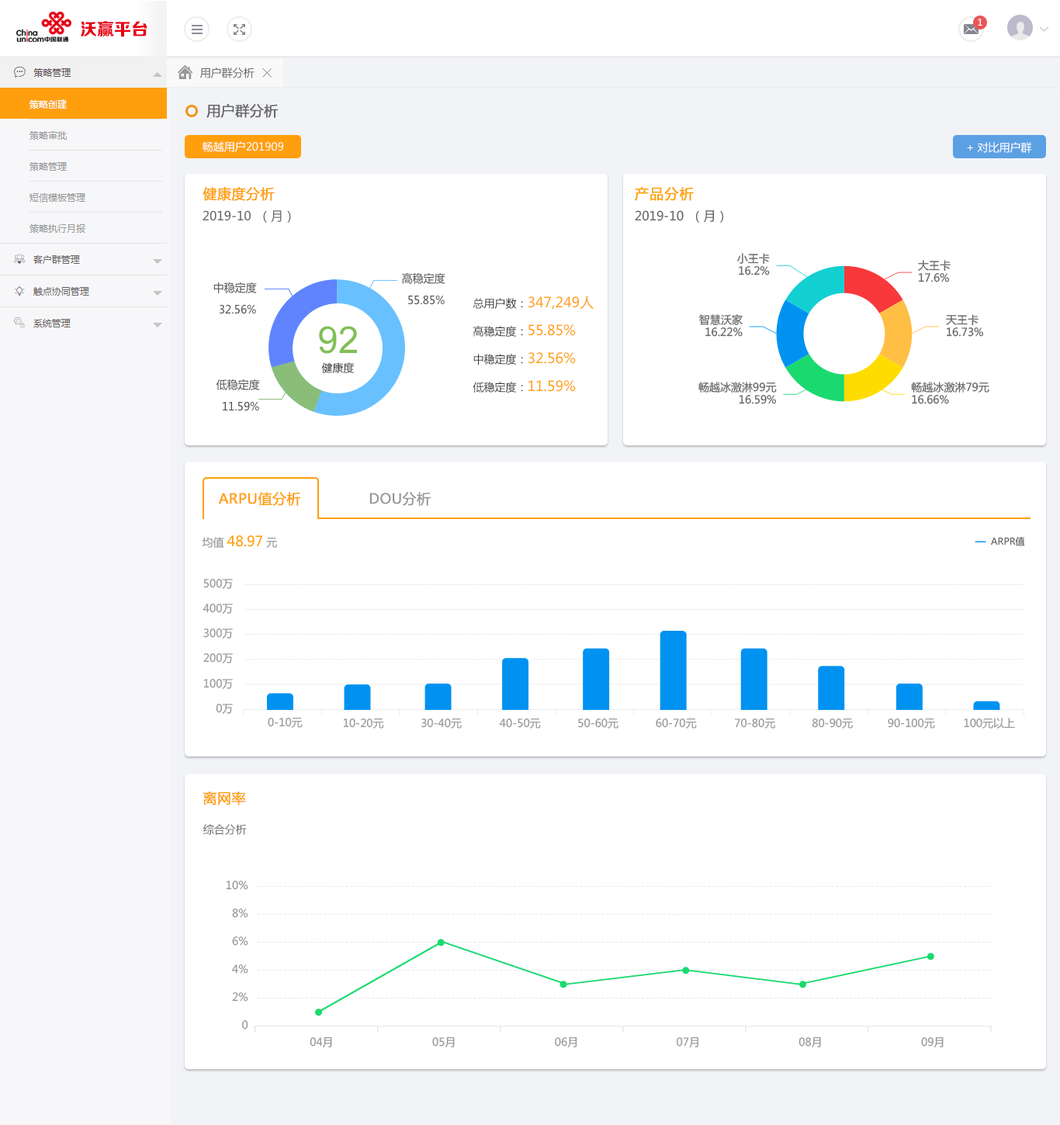
<style>
.page{position:relative;width:1060px;height:1125px;background:#ffffff}
.page>*{position:absolute;margin:0}
.t1{font:17.1px "FZZDHJW--GB1-0";color:#e60013}
.t2{font:9.3px "MicrosoftYaHei";color:#ffffff}
.t3{font:10.9px "MicrosoftYaHei";color:#666666}
.t4{font:14px "MicrosoftYaHei";color:#666666;font-weight:bold}
.t5{font:10.9px "MicrosoftYaHei";color:#ffffff}
.t6{font:14px "MicrosoftYaHei";color:#ff9f0e;font-weight:bold}
.t7{font:12.4px "MicrosoftYaHei";color:#666666}
.t8{font:10.9px/12.2px "MicrosoftYaHei";color:#666666}
.t9{font:10.9px/21.7px "MicrosoftYaHei";color:#555555}
.t10{font:14px/27.9px "MicrosoftYaHei";color:#ff9f0e}
.t11{font:10.9px/27.9px "MicrosoftYaHei";color:#333333}
.t12{font:37.2px "ArialMT";color:#7fbf54}
.t13{font:10.9px "MicrosoftYaHei";color:#333333}
.t14{font:14px "MicrosoftYaHei";color:#999999;font-weight:bold}
.t15{font:14px "MicrosoftYaHei";color:#ff9f0e}
.t16{font:10.9px "MicrosoftYaHei";color:#999999}
.t17{font:9.3px "MicrosoftYaHei";color:#666666}
</style>
<div class="page">
<p class="t1" style="left:81px;top:21px;width:66px;height:16px">沃赢平台</p>
<p class="t2" style="left:978px;top:19px;width:4px;height:7px">1</p>
<p class="t3" style="left:200px;top:68px;width:54px;height:10px">用户群分析</p>
<p class="t4" style="left:206px;top:103px;width:73px;height:15px">用户群分析</p>
<p class="t5" style="left:203px;top:141px;width:80px;height:11px">畅越用户201909</p>
<p class="t5" style="left:967px;top:142px;width:65px;height:11px">+ 对比用户群</p>
<p class="t6" style="left:203px;top:186px;width:72px;height:15px">健康度分析</p>
<p class="t6" style="left:635px;top:187px;width:59px;height:14px">产品分析</p>
<p class="t7" style="left:203px;top:210px;width:88px;height:13px">2019-10  （月）</p>
<p class="t7" style="left:635px;top:210px;width:89px;height:13px">2019-10  （月）</p>
<p class="t8" style="left:736px;top:253px;width:34px;height:22px;text-align:right">小王卡<br>16.2%</p>
<p class="t8" style="left:918px;top:260px;width:32px;height:22px">大王卡<br>17.6%</p>
<p class="t9" style="left:401px;top:273px;width:44px;height:32px;text-align:right">高稳定度<br>55.85%</p>
<p class="t9" style="left:213px;top:282px;width:44px;height:32px;text-align:right">中稳定度<br>32.56%</p>
<p class="t10" style="left:473px;top:296px;width:121px;height:97px"><span class="t11">总用户数：</span>347,249人<br><span class="t11">高稳定度：</span>55.85%<br><span class="t11">中稳定度：</span>32.56%<br><span class="t11">低稳定度：</span>11.59%</p>
<p class="t8" style="left:698px;top:314px;width:45px;height:23px;text-align:right">智慧沃家<br>16.22%</p>
<p class="t8" style="left:946px;top:314px;width:38px;height:23px">天王卡<br>16.73%</p>
<p class="t12" style="left:319px;top:326px;width:38px;height:28px">92</p>
<p class="t13" style="left:321px;top:362px;width:34px;height:11px">健康度</p>
<p class="t9" style="left:216px;top:379px;width:44px;height:32px;text-align:right">低稳定度<br>11.59%</p>
<p class="t8" style="left:698px;top:382px;width:79px;height:22px;text-align:right">畅越冰激淋99元<br>16.59%</p>
<p class="t8" style="left:911px;top:382px;width:78px;height:22px">畅越冰激淋79元<br>16.66%</p>
<p class="t6" style="left:218px;top:492px;width:83px;height:14px">ARPU值分析</p>
<p class="t14" style="left:369px;top:492px;width:62px;height:14px">DOU分析</p>
<p class="t15" style="left:202px;top:535px;width:76px;height:13px"><span class="t16">均值 </span>48.97<span class="t16"> 元</span></p>
<p class="t17" style="left:991px;top:536px;width:34px;height:10px">ARPR值</p>
<p class="t16" style="left:203px;top:579px;width:30px;height:10px">500万</p>
<p class="t16" style="left:203px;top:604px;width:30px;height:10px">400万</p>
<p class="t16" style="left:203px;top:628px;width:30px;height:11px">300万</p>
<p class="t16" style="left:203px;top:653px;width:30px;height:10px">200万</p>
<p class="t16" style="left:203px;top:679px;width:30px;height:10px">100万</p>
<p class="t16" style="left:216px;top:704px;width:17px;height:10px">0万</p>
<p class="t16" style="left:268px;top:718px;width:35px;height:10px">0-10元</p>
<p class="t16" style="left:343px;top:718px;width:41px;height:11px">10-20元</p>
<p class="t16" style="left:421px;top:718px;width:41px;height:11px">30-40元</p>
<p class="t16" style="left:499px;top:718px;width:42px;height:11px">40-50元</p>
<p class="t16" style="left:578px;top:718px;width:40px;height:11px">50-60元</p>
<p class="t16" style="left:656px;top:718px;width:41px;height:11px">60-70元</p>
<p class="t16" style="left:734px;top:718px;width:42px;height:11px">70-80元</p>
<p class="t16" style="left:812px;top:718px;width:41px;height:11px">80-90元</p>
<p class="t16" style="left:888px;top:718px;width:47px;height:11px">90-100元</p>
<p class="t16" style="left:964px;top:718px;width:51px;height:11px">100元以上</p>
<p class="t6" style="left:203px;top:791px;width:43px;height:14px">离网率</p>
<p class="t3" style="left:203px;top:824px;width:44px;height:11px">综合分析</p>
<p class="t16" style="left:226px;top:881px;width:22px;height:9px">10%</p>
<p class="t16" style="left:232px;top:909px;width:16px;height:9px">8%</p>
<p class="t16" style="left:232px;top:937px;width:16px;height:9px">6%</p>
<p class="t16" style="left:231px;top:964px;width:17px;height:10px">4%</p>
<p class="t16" style="left:232px;top:992px;width:16px;height:10px">2%</p>
<p class="t16" style="left:241px;top:1020px;width:7px;height:10px">0</p>
<p class="t16" style="left:310px;top:1037px;width:22px;height:10px">04月</p>
<p class="t16" style="left:432px;top:1037px;width:23px;height:10px">05月</p>
<p class="t16" style="left:555px;top:1037px;width:22px;height:10px">06月</p>
<p class="t16" style="left:676px;top:1037px;width:22px;height:10px">07月</p>
<p class="t16" style="left:798px;top:1037px;width:23px;height:10px">08月</p>
<p class="t16" style="left:921px;top:1037px;width:22px;height:10px">09月</p>
</div>
